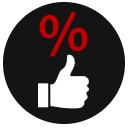
<style>
.page{position:relative;width:128px;height:128px;background:#141414}
.page>*{position:absolute;margin:0}
.t1{font:52.1px "Acme-Regular";color:#c30000}
</style>
<div class="page">
<p class="t1" style="left:39px;top:11px;width:49px;height:47px">%</p>
</div>
